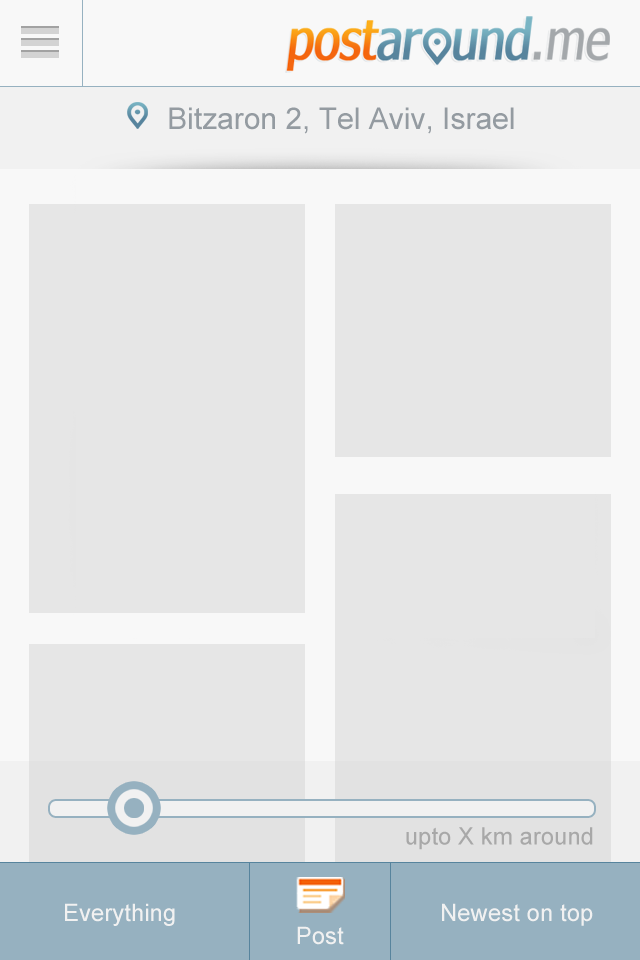
<style>
.page{position:relative;width:640px;height:960px;background:#e6e6e6}
.page>*{position:absolute;margin:0}
.t1{font:30px "ArialMT";color:#949ba1}
.t2{font:24px "ArialMT";color:#9d9d9d}
.t3{font:24px "ArialMT";color:#f1f1f1}
</style>
<div class="page">
<p class="t1" style="left:169px;top:107px;width:345px;height:27px">Bitzaron 2, Tel Aviv, Israel</p>
<p class="t2" style="left:406px;top:827px;width:187px;height:23px">upto X km around</p>
<p class="t3" style="left:65px;top:903px;width:110px;height:23px">Everything</p>
<p class="t3" style="left:442px;top:903px;width:151px;height:23px">Newest on top</p>
<p class="t3" style="left:297px;top:926px;width:47px;height:19px">Post</p>
</div>
